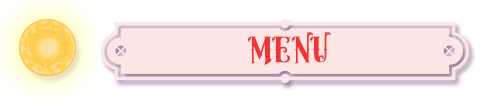
<style>
.page{position:relative;width:484px;height:106px;background:#ffffff}
.page>*{position:absolute;margin:0}
.t1{font:41.7px "Moyers";color:#f23434}
</style>
<div class="page">
<p class="t1" style="left:248px;top:31px;width:83px;height:34px">MENU</p>
</div>
